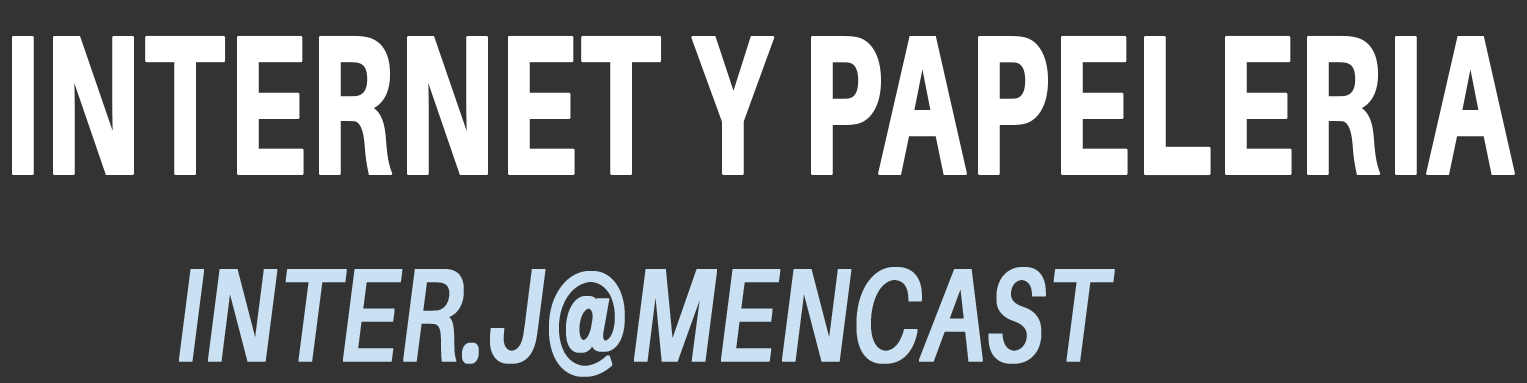
<style>
.page{position:relative;width:1527px;height:383px;background:#333333}
.page>*{position:absolute;margin:0}
.t1{font:198px "Aileron-Heavy";color:#ffffff;font-weight:bold;scale:0.64 1}
.t2{font:132px "Aileron-SemiBoldItalic";color:#c9e1f2;font-weight:bold;scale:0.73 1}
</style>
<div class="page">
<p class="t1" style="left:12px;top:35px;width:1503px;height:141px">INTERNET Y PAPELERIA</p>
<p class="t2" style="left:179px;top:267px;width:936px;height:110px">INTER.J@MENCAST</p>
</div>
